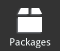
<style>
.page{position:relative;width:60px;height:51px;background:#333333}
.page>*{position:absolute;margin:0}
.t1{font:10px "DroidSans";letter-spacing:0.007em;color:#f9ffff}
</style>
<div class="page">
<p class="t1" style="left:10px;top:38px;width:41px;height:10px">Packages</p>
</div>
